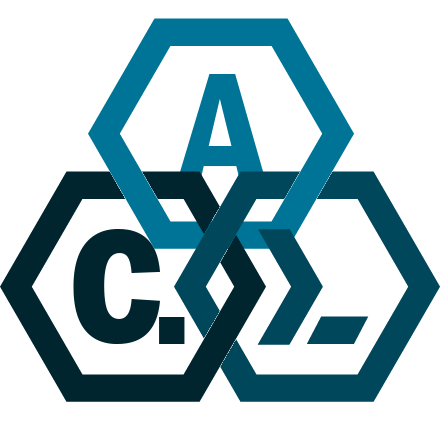
<style>
.page{position:relative;width:440px;height:440px;background:#ffffff}
.page>*{position:absolute;margin:0}
.t1{font:174px "FranklinGothic-DemiCond";color:#007496}
.t2{font:222px "FranklinGothic-DemiCond";color:#00252f}
.t3{font:186px "FranklinGothic-DemiCond";color:#00252f}
</style>
<div class="page">
<p class="t1" style="left:174px;top:74px;width:95px;height:116px">A</p>
<p class="t2" style="left:73px;top:229px;width:87px;height:115px">c</p>
<p class="t3" style="left:159px;top:317px;width:26px;height:27px">.</p>
</div>
